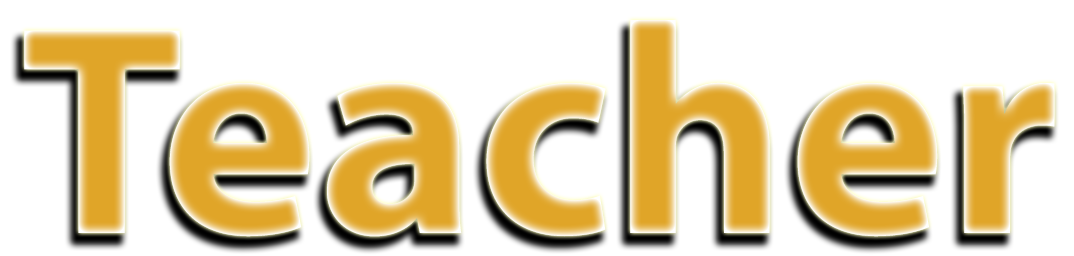
<style>
.page{position:relative;width:1074px;height:256px;background:#ffffff}
.page>*{position:absolute;margin:0}
.t1{font:300px "MyriadPro-Bold";color:#e0a528}
</style>
<div class="page">
<p class="t1" style="left:24px;top:20px;width:1031px;height:217px">Teacher</p>
</div>
